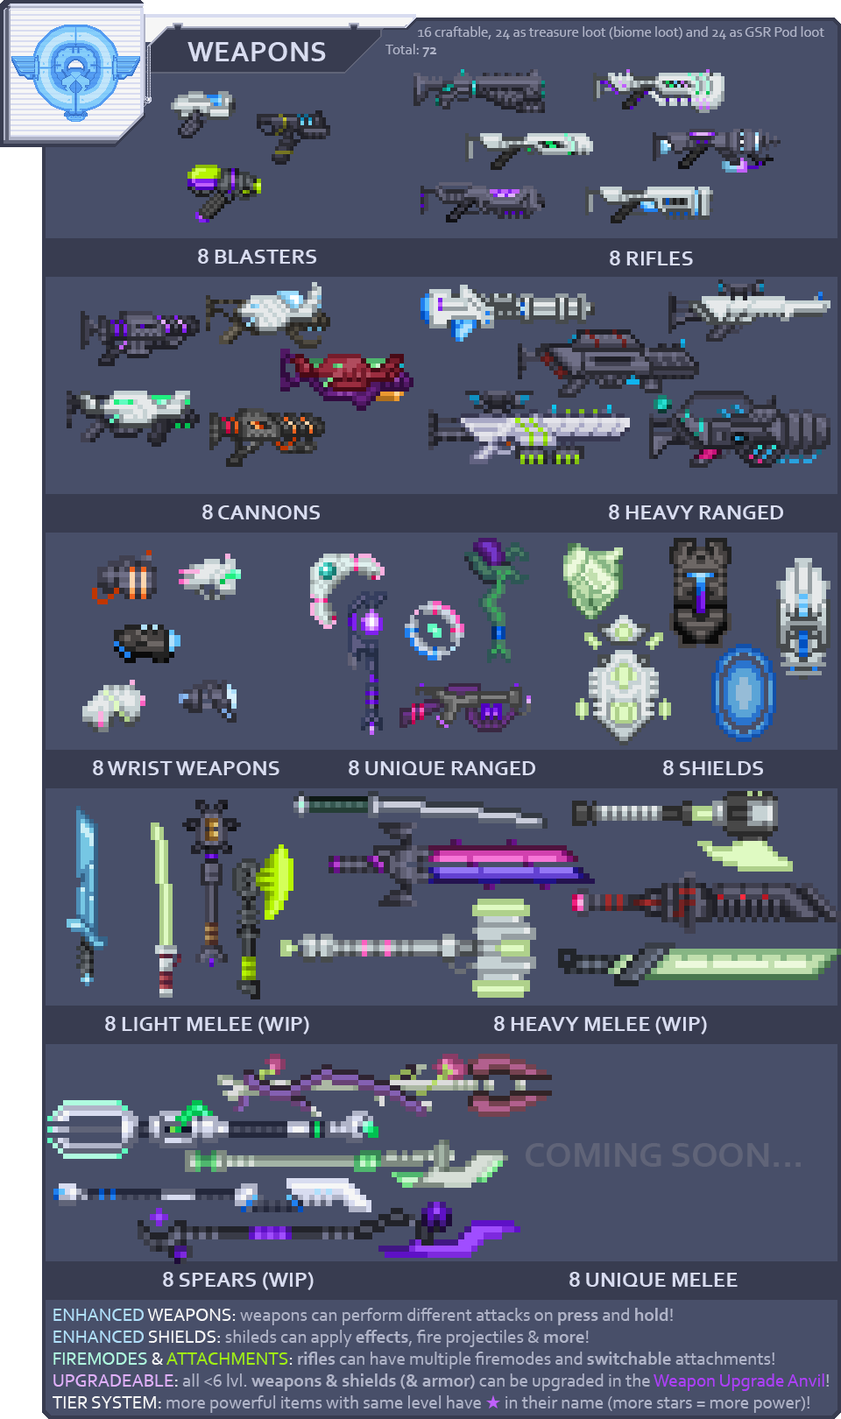
<style>
.page{position:relative;width:841px;height:1419px;background:#484f69}
.page>*{position:absolute;margin:0}
.t1{font:14.6px "Corbel";color:#b0b4c8}
.t2{font:14.6px "Corbel-Bold";color:#b0b4c8}
.t3{font:29.2px "Corbel-Bold";color:#d8dcf0}
.t4{font:21.9px "Corbel-Bold";color:#d8dcf0}
.t5{font:36.5px "Corbel-Bold";color:#606478}
.t6{font:18.2px "Corbel";color:#b0b4c8}
.t7{font:18.2px "Corbel";color:#b0e0fc}
.t8{font:18.2px "Corbel";color:#f6f6f6}
.t9{font:18.2px "Corbel-Bold";color:#b0b4c8}
.t10{font:18.2px "Corbel";color:#b0fce0}
.t11{font:18.2px "Corbel";color:#a1ef10}
.t12{font:18.2px "Corbel";color:#e0b0fc}
.t13{font:18.2px "Corbel";color:#ad3ffa}
.t14{font:18.2px "SegoeUISymbol";color:#c060fc}
</style>
<div class="page">
<p class="t1" style="left:385px;top:26px;width:439px;height:31px">16 craftable, 24 as treasure loot (biome loot) and 24 as GSR Pod loot<br>Total: <span class="t2">72</span></p>
<p class="t3" style="left:187px;top:42px;width:139px;height:19px">WEAPONS</p>
<p class="t4" style="left:198px;top:249px;width:118px;height:15px">8 BLASTERS</p>
<p class="t4" style="left:609px;top:250px;width:84px;height:15px">8 RIFLES</p>
<p class="t4" style="left:202px;top:504px;width:118px;height:15px">8 CANNONS</p>
<p class="t4" style="left:609px;top:504px;width:174px;height:15px">8 HEAVY RANGED</p>
<p class="t4" style="left:93px;top:760px;width:186px;height:15px">8 WRIST WEAPONS</p>
<p class="t4" style="left:349px;top:760px;width:186px;height:15px">8 UNIQUE RANGED</p>
<p class="t4" style="left:663px;top:760px;width:100px;height:15px">8 SHIELDS</p>
<p class="t4" style="left:105px;top:1016px;width:204px;height:18px">8 LIGHT MELEE (WIP)</p>
<p class="t4" style="left:494px;top:1016px;width:213px;height:18px">8 HEAVY MELEE (WIP)</p>
<p class="t5" style="left:525px;top:1143px;width:275px;height:23px">COMING SOON...</p>
<p class="t4" style="left:163px;top:1271px;width:150px;height:19px">8 SPEARS (WIP)</p>
<p class="t4" style="left:569px;top:1271px;width:168px;height:15px">8 UNIQUE MELEE</p>
<p class="t6" style="left:53px;top:1307px;width:775px;height:105px"><span class="t7">ENHANCED</span><span class="t8"> WEAPONS:</span> weapons can perform different attacks on <span class="t9">press</span> and <span class="t9">hold</span>!<br><span class="t7">ENHANCED</span><span class="t8"> SHIELDS:</span> shileds can apply <span class="t9">effects</span>, fire projectiles &amp; <span class="t9">more</span>!<br><span class="t10">FIREMODES</span><span class="t8"> &amp; </span><span class="t11">ATTACHMENTS</span><span class="t8">: </span><span class="t9">rifles</span> can have multiple firemodes and <span class="t9">switchable</span> attachments!<br><span class="t12">UPGRADEABLE</span><span class="t8">:</span> all &lt;6 lvl. <span class="t9">weapons &amp; shields (&amp; armor)</span> can be upgraded in the <span class="t13">Weapon Upgrade Anvil</span>!<br><span class="t8">TIER SYSTEM:</span> more powerful items with same level have <span class="t14">★</span> in their name (more stars = more power)!</p>
</div>
